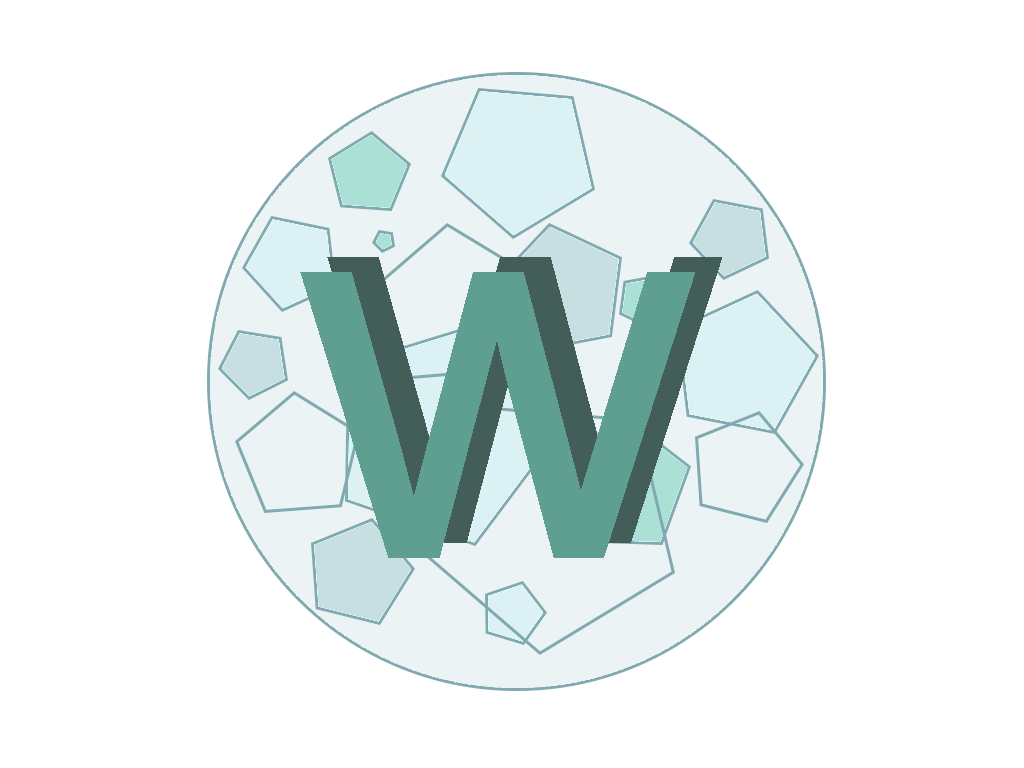
<style>
.page{position:relative;width:1024px;height:768px;background:#ffffff}
.page>*{position:absolute;margin:0}
.t1{font:550px "ArialMT"}
.t2{font:550px "ArialMT";color:#5e9f92}
</style>
<div class="page">
<p class="t1" style="left:327px;top:257px;width:395px;height:286px">w</p>
<p class="t2" style="left:300px;top:272px;width:395px;height:286px">w</p>
</div>
